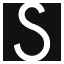
<style>
.page{position:relative;width:64px;height:64px;background:#111111}
.page>*{position:absolute;margin:0}
.t1{font:85px "Champagne&Limousines-Bold";letter-spacing:0.025em;color:#ffffff}
</style>
<div class="page">
<p class="t1" style="left:14px;top:1px;width:36px;height:61px">S</p>
</div>
